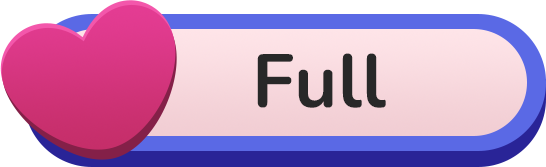
<style>
.page{position:relative;width:546px;height:167px}
.page>*{position:absolute;margin:0}
.t1{font:75px "Nunito-Bold";color:#282828}
</style>
<div class="page">
<p class="t1" style="left:257px;top:53px;width:129px;height:55px">Full</p>
</div>
